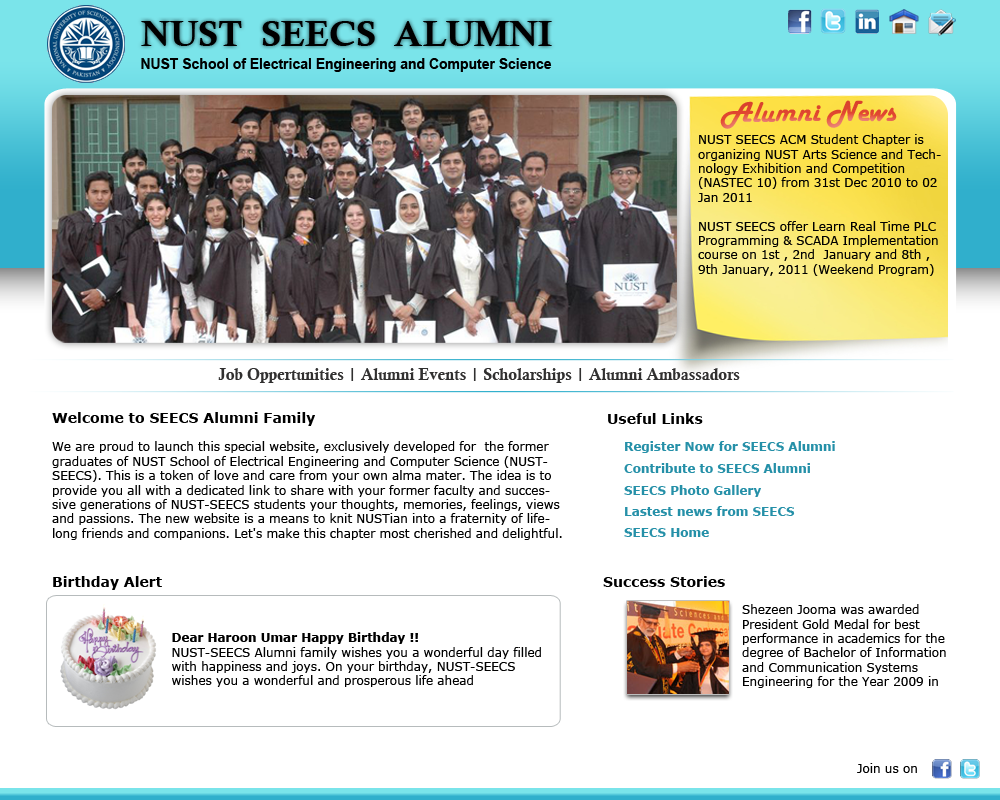
<style>
.page{position:relative;width:1000px;height:800px;background:#ffffff}
.page>*{position:absolute;margin:0}
.t1{font:36px "CalisMTBol";color:#000000}
.t2{font:15px "Arial-BoldMT";color:#000000;scale:0.93 1}
.t3{font:30px "HarlowSolid";color:#e24831}
.t4{font:12px "Verdana";color:#000000}
.t5{font:16px "CalisMTBol";color:#313030}
.t6{font:14px "Verdana-Bold";color:#000000}
.t7{font:12px "Verdana-Bold";color:#2590a8}
.t8{font:12px "Verdana-Bold";color:#000000}
</style>
<div class="page">
<p class="t1" style="left:141px;top:21px;width:411px;height:25px">NUST  SEECS  ALUMNI</p>
<p class="t2" style="left:141px;top:58px;width:411px;height:14px">NUST School of Electrical Engineering and Computer Science</p>
<p class="t3" style="left:720px;top:100px;width:177px;height:29px">Alumni News</p>
<p class="t4" style="left:698px;top:134px;width:243px;height:142px">NUST SEECS ACM Student Chapter is organizing NUST Arts Science and Technology Exhibition and Competition (NASTEC 10) from 31st Dec 2010 to 02 Jan 2011<br><br>NUST SEECS offer Learn Real Time PLC Programming &amp; SCADA Implementation course on 1st , 2nd  January and 8th , 9th January, 2011 (Weekend Program)</p>
<p class="t5" style="left:218px;top:368px;width:522px;height:15px">Job Oppertunities | Alumni Events | Scholarships | Alumni Ambassadors</p>
<p class="t4" style="left:52px;top:412px;width:510px;height:128px"><span class="t6">Welcome to SEECS Alumni Family<br></span><br>We are proud to launch this special website, exclusively developed for  the former graduates of NUST School of Electrical Engineering and Computer Science (NUST-SEECS). This is a token of love and care from your own alma mater. The idea is to provide you all with a dedicated link to share with your former faculty and successive generations of NUST-SEECS students your thoughts, memories, feelings, views and passions. The new website is a means to knit NUSTian into a fraternity of life-long friends and companions. Let's make this chapter most cherished and delightful. Long live, NUST-SEECS alumni! We are truly proud of you!!</p>
<p class="t6" style="left:608px;top:413px;width:95px;height:11px">Useful Links</p>
<p class="t7" style="left:625px;top:441px;width:210px;height:12px">Register Now for SEECS Alumni</p>
<p class="t7" style="left:624px;top:463px;width:186px;height:10px">Contribute to SEECS Alumni</p>
<p class="t7" style="left:624px;top:485px;width:137px;height:12px">SEECS Photo Gallery</p>
<p class="t7" style="left:625px;top:506px;width:170px;height:10px">Lastest news from SEECS</p>
<p class="t7" style="left:624px;top:528px;width:85px;height:9px">SEECS Home</p>
<p class="t6" style="left:53px;top:576px;width:109px;height:14px">Birthday Alert</p>
<p class="t6" style="left:603px;top:576px;width:122px;height:11px">Success Stories</p>
<p class="t4" style="left:742px;top:604px;width:204px;height:84px">Shezeen Jooma was awarded President Gold Medal for best performance in academics for the degree of Bachelor of Information and Communication Systems Engineering for the Year 2009 in SEECS Convocation 2010</p>
<p class="t4" style="left:172px;top:632px;width:369px;height:55px"><span class="t8">Dear Haroon Umar Happy Birthday !!<br></span>NUST-SEECS Alumni family wishes you a wonderful day filled with happiness and joys. On your birthday, NUST-SEECS wishes you a wonderful and prosperous life ahead</p>
<p class="t4" style="left:857px;top:763px;width:60px;height:10px">Join us on</p>
</div>
